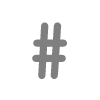
<style>
.page{position:relative;width:100px;height:100px;background:#ffffff}
.page>*{position:absolute;margin:0}
.t1{font:72px "CourierNewPS-BoldMT";color:#7f7f7f}
</style>
<div class="page">
<p class="t1" style="left:32px;top:22px;width:35px;height:57px">#</p>
</div>
